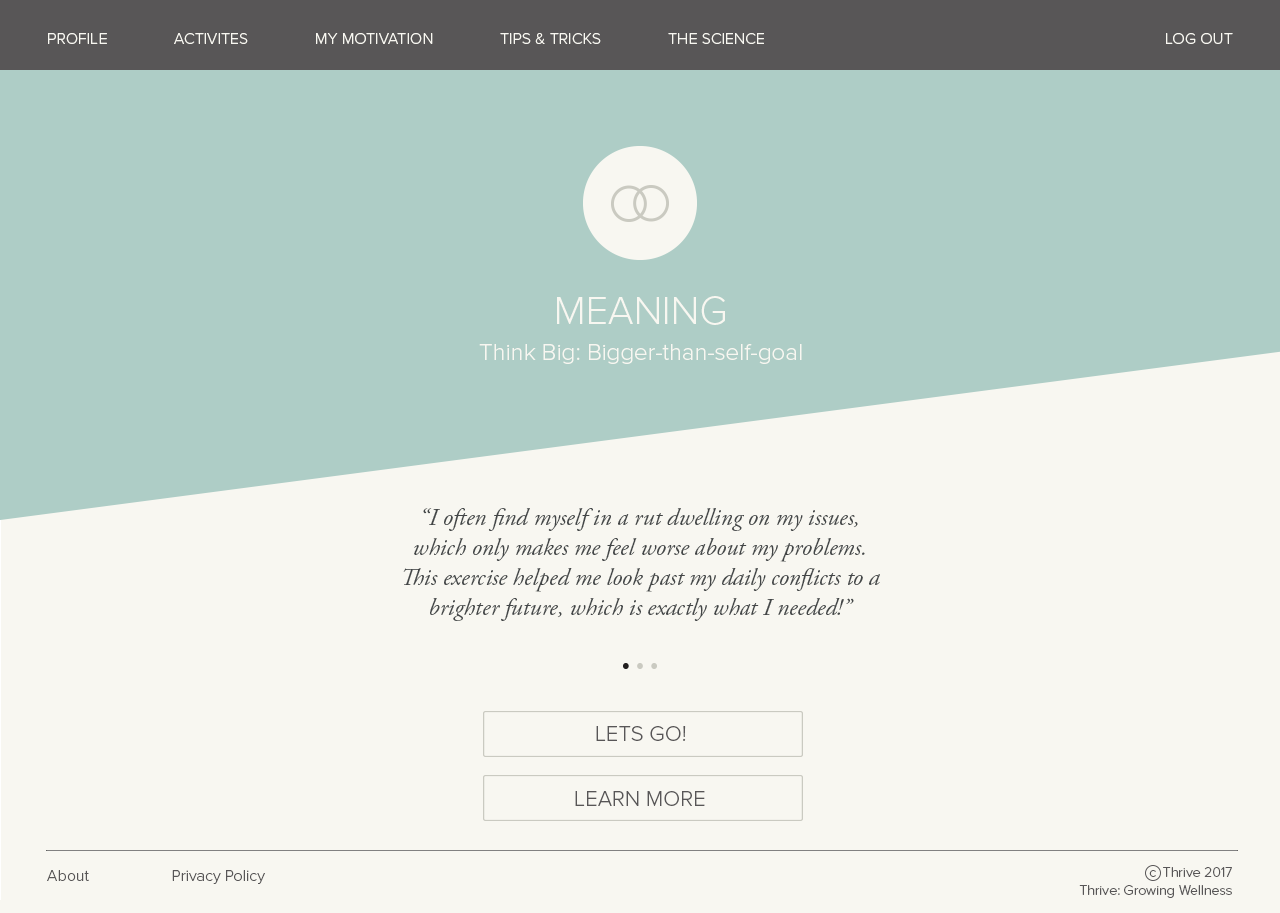
<style>
.page{position:relative;width:1280px;height:913px;background:#f8f7f1}
.page>*{position:absolute;margin:0}
.t1{font:16px "ProximaNova-Light";color:#f8f7f1}
.t2{font:24px/16px "ProximaNova-Light";color:#f8f7f1}
.t3{font:40px/13px "ProximaNova-Light";color:#f8f7f1}
.t4{font:24px/30px "AGaramondPro-Italic";color:#434647}
.t5{font:22px "ProximaNova-Light";color:#585657}
.t6{font:16px "ProximaNova-Light";color:#585657}
.t7{font:14px/13px "ProximaNova-Light";color:#585657}
</style>
<div class="page">
<p class="t1" style="left:48px;top:33px;width:59px;height:11px">PROFILE</p>
<p class="t1" style="left:174px;top:33px;width:74px;height:11px">ACTIVITES</p>
<p class="t1" style="left:316px;top:33px;width:117px;height:11px">MY MOTIVATION</p>
<p class="t1" style="left:500px;top:33px;width:101px;height:11px">TIPS &amp; TRICKS</p>
<p class="t1" style="left:668px;top:33px;width:96px;height:11px">THE SCIENCE</p>
<p class="t1" style="left:1166px;top:33px;width:67px;height:11px">LOG OUT</p>
<p class="t2" style="left:479px;top:296px;width:323px;height:68px;text-align:center"><span class="t3">MEANING<br></span>Think Big: Bigger-than-self-goal</p>
<p class="t4" style="left:403px;top:508px;width:477px;height:113px;text-align:center">“I often find myself in a rut dwelling on my issues, which only makes me feel worse about my problems.  This exercise helped me look past my daily conflicts to a brighter future, which is exactly what I needed!”</p>
<p class="t5" style="left:596px;top:726px;width:90px;height:15px">LETS GO!</p>
<p class="t5" style="left:575px;top:791px;width:130px;height:15px">LEARN MORE</p>
<p class="t6" style="left:47px;top:870px;width:42px;height:11px">About</p>
<p class="t6" style="left:172px;top:870px;width:93px;height:14px">Privacy Policy</p>
<p class="t7" style="left:1079px;top:867px;width:153px;height:31px;text-align:right">c  Thrive 2017<br>Thrive: Growing Wellness</p>
</div>
